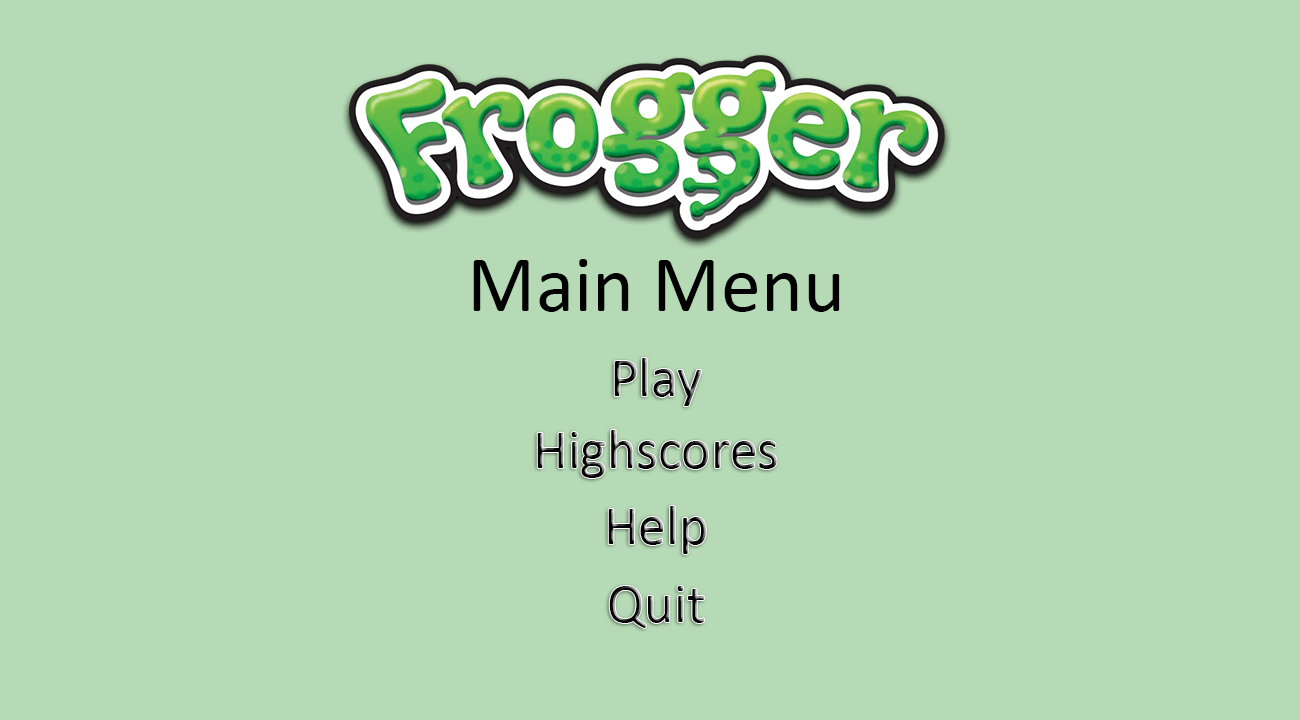
<style>
.page{position:relative;width:1300px;height:720px;background:#b5dab5}
.page>*{position:absolute;margin:0}
.t1{font:80px "Calibri";color:#000000}
.t2{font:56px "Calibri"}
</style>
<div class="page">
<p class="t1" style="left:473px;top:259px;width:367px;height:53px">Main Menu</p>
<p class="t2" style="left:614px;top:358px;width:88px;height:48px">Play</p>
<p class="t2" style="left:537px;top:430px;width:240px;height:48px">Highscores</p>
<p class="t2" style="left:608px;top:506px;width:98px;height:48px">Help</p>
<p class="t2" style="left:609px;top:586px;width:95px;height:42px">Quit</p>
</div>
